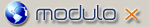
<style>
.page{position:relative;width:149px;height:27px;background:#d4d0c8}
.page>*{position:absolute;margin:0}
.t1{font:19.3px "Birdman";color:#1f3662}
.t2{font:19.3px "Birdman";color:#df7512}
</style>
<div class="page">
<p class="t1" style="left:36px;top:5px;width:102px;height:15px">Modulo <span class="t2">x</span></p>
</div>
